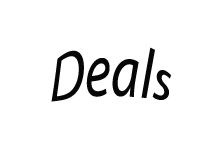
<style>
.page{position:relative;width:220px;height:150px;background:#ffffff}
.page>*{position:absolute;margin:0}
.t1{font:55px "MyriadPro-It";color:#070707}
</style>
<div class="page">
<p class="t1" style="left:51px;top:47px;width:120px;height:55px">Deals</p>
</div>
